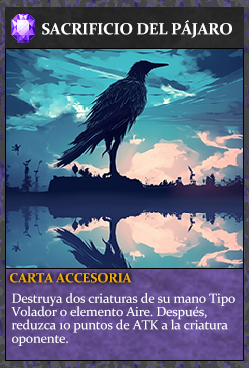
<style>
.page{position:relative;width:249px;height:368px}
.page>*{position:absolute;margin:0}
.t1{font:16px "Constantia-Bold";letter-spacing:-0.02em;color:#ffffff}
.t2{font:13.3px "Constantia-Bold";letter-spacing:-0.02em;color:#f2ac05}
.t3{font:13.3px/13.3px "Constantia";letter-spacing:-0.02em;color:#ffffff}
</style>
<div class="page">
<p class="t1" style="left:42px;top:20px;width:190px;height:18px">SACRIFICIO DEL PÁJARO</p>
<p class="t2" style="left:10px;top:273px;width:122px;height:10px">CARTA ACCESORIA</p>
<p class="t3" style="left:11px;top:293px;width:224px;height:53px">Destruya dos criaturas de su mano Tipo<br>Volador o elemento Aire. Después, <br>reduzca 10 puntos de ATK a la criatura<br>oponente.</p>
</div>
